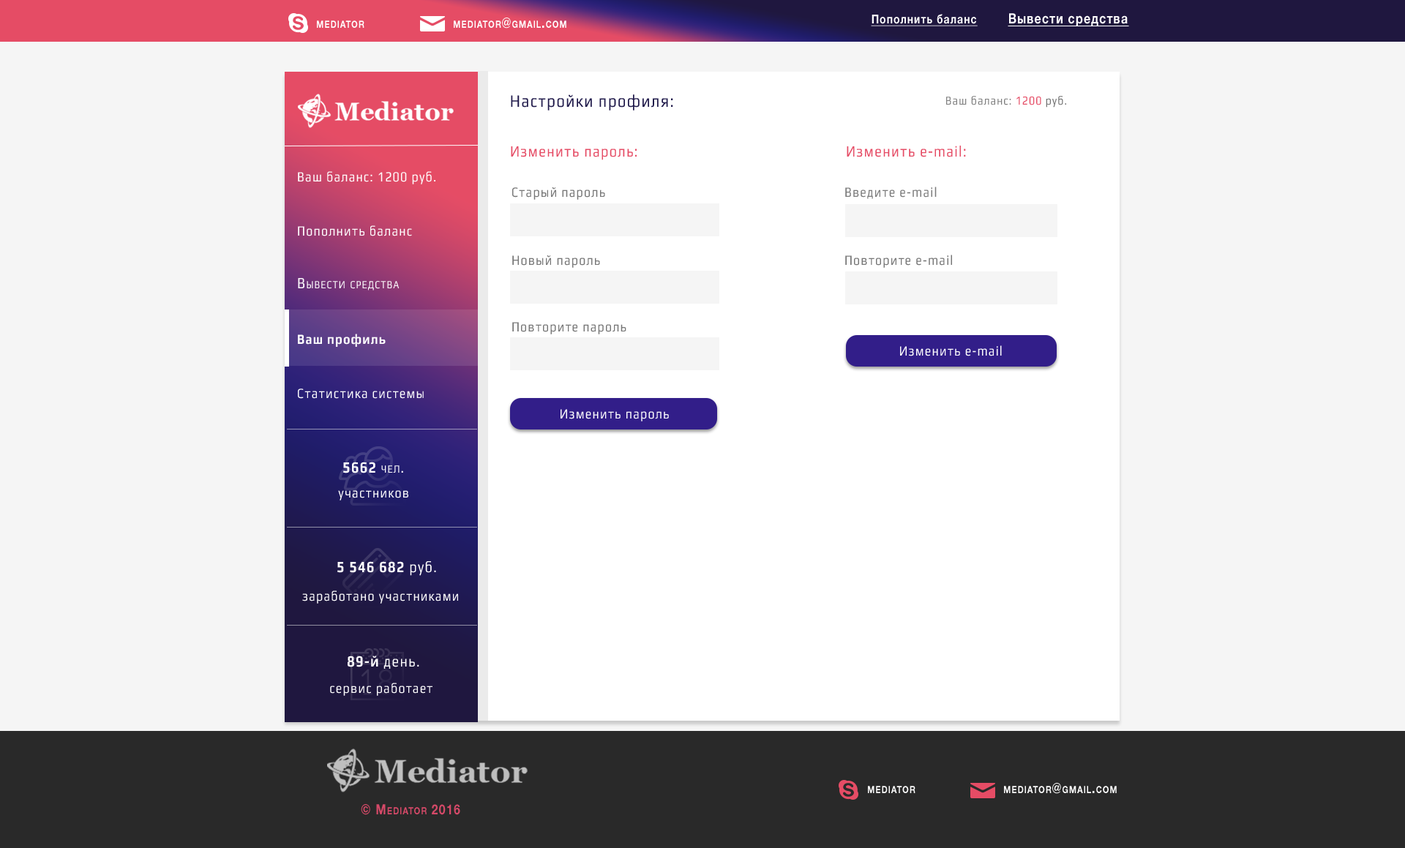
<style>
.page{position:relative;width:1405px;height:848px;background:#f5f5f5}
.page>*{position:absolute;margin:0}
.t1{font:14.1px "HelveticaNeueCyr-Bold";letter-spacing:0.075em;color:#ffffff;font-variant:small-caps;scale:0.83 1}
.t2{font:12.3px "HelveticaNeueCyr-Bold";letter-spacing:0.075em;color:#ffffff;text-decoration:underline;scale:0.83 1}
.t3{font:14.1px "HelveticaNeueCyr-Bold";letter-spacing:0.075em;color:#ffffff;text-decoration:underline;scale:0.83 1}
.t4{font:17.6px "Play";letter-spacing:0.075em;color:#1f194a;scale:0.83 1}
.t5{font:12.3px "Play";letter-spacing:0.075em;color:#808080;scale:0.83 1}
.t6{font:12.3px "Play";letter-spacing:0.075em;color:#e54c65;scale:0.83 1}
.t7{font:12.3px "Play";letter-spacing:0.075em;color:#717171;scale:0.83 1}
.t8{font:15.8px "Play";letter-spacing:0.075em;color:#e54c65;scale:0.83 1}
.t9{font:14.1px "Play";letter-spacing:0.075em;color:#ffffff;scale:0.83 1}
.t10{font:14.1px "Play";letter-spacing:0.075em;color:#767676;scale:0.83 1}
.t11{font:15.8px "Play";letter-spacing:0.075em;color:#ffffff;font-variant:small-caps;scale:0.83 1}
.t12{font:14.1px "Play-Bold";letter-spacing:0.075em;color:#ffffff;scale:0.83 1}
.t13{font:15.8px "Play-Bold";letter-spacing:0.075em;color:#ffffff;font-variant:small-caps;scale:0.83 1}
.t14{font:15.8px "Play-Bold";letter-spacing:0.075em;color:#ffffff;scale:0.83 1}
.t15{font:15.8px "Play";letter-spacing:0.075em;color:#ffffff;scale:0.83 1}
.t16{font:14.1px "HelveticaNeueCyr-Bold";letter-spacing:0.075em;color:#d64968;font-variant:small-caps;scale:0.83 1}
</style>
<div class="page">
<p class="t1" style="left:454px;top:18px;width:113px;height:11px">mediator@gmail.com</p>
<p class="t2" style="left:871px;top:14px;width:107px;height:12px">Пополнить баланс</p>
<p class="t3" style="left:1008px;top:13px;width:122px;height:13px">Вывести средства</p>
<p class="t1" style="left:317px;top:20px;width:48px;height:8px">mediator</p>
<p class="t4" style="left:511px;top:94px;width:162px;height:17px">Настройки профиля:</p>
<p class="t5" style="left:947px;top:96px;width:120px;height:12px">Ваш баланс: <span class="t6">1200 </span><span class="t7">руб.</span></p>
<p class="t8" style="left:511px;top:146px;width:126px;height:14px">Изменить пароль:</p>
<p class="t8" style="left:847px;top:146px;width:119px;height:11px">Изменить e-mail:</p>
<p class="t9" style="left:298px;top:171px;width:138px;height:13px">Ваш баланс: 1200 руб.</p>
<p class="t10" style="left:512px;top:187px;width:93px;height:13px">Старый пароль</p>
<p class="t10" style="left:845px;top:187px;width:92px;height:12px;opacity:0.97">Введите e-mail</p>
<p class="t9" style="left:298px;top:225px;width:114px;height:11px">Пополнить баланс</p>
<p class="t10" style="left:512px;top:255px;width:88px;height:13px">Новый пароль</p>
<p class="t10" style="left:845px;top:255px;width:107px;height:13px">Повторите e-mail</p>
<p class="t11" style="left:298px;top:278px;width:102px;height:13px">Вывести средства</p>
<p class="t10" style="left:512px;top:322px;width:115px;height:13px">Повторите пароль</p>
<p class="t12" style="left:298px;top:334px;width:88px;height:13px">Ваш профиль</p>
<p class="t9" style="left:900px;top:346px;width:102px;height:10px">Изменить e-mail</p>
<p class="t9" style="left:298px;top:389px;width:126px;height:10px">Статистика системы</p>
<p class="t9" style="left:561px;top:409px;width:108px;height:13px">Изменить пароль</p>
<p class="t13" style="left:343px;top:462px;width:60px;height:12px">5662 <span class="t11">чел.</span></p>
<p class="t9" style="left:338px;top:490px;width:70px;height:11px">участников</p>
<p class="t14" style="left:337px;top:561px;width:99px;height:15px">5 546 682<span class="t15"> руб.</span></p>
<p class="t9" style="left:302px;top:591px;width:156px;height:13px">заработано участниками</p>
<p class="t15" style="left:348px;top:656px;width:71px;height:13px"><span class="t14">89-й </span>день.</p>
<p class="t9" style="left:330px;top:683px;width:103px;height:13px">сервис работает</p>
<p class="t1" style="left:1004px;top:783px;width:113px;height:11px">mediator@gmail.com</p>
<p class="t1" style="left:868px;top:786px;width:48px;height:8px">mediator</p>
<p class="t16" style="left:361px;top:804px;width:99px;height:11px">© Mediator 2016</p>
</div>
